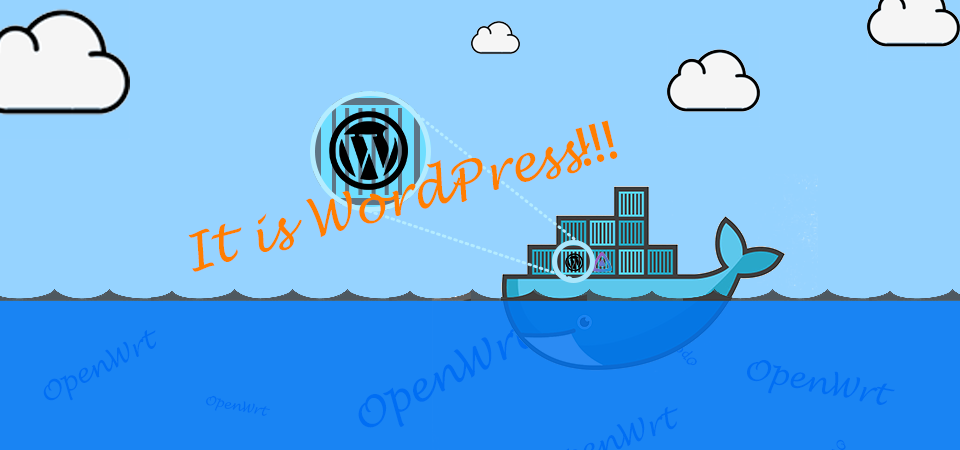
<style>
.page{position:relative;width:960px;height:450px;background:#96d3ff}
.page>*{position:absolute;margin:0}
.t1{font:12px "LucidaHandwriting-Italic";color:#ff7e00}
.t2{font:12px "AdobeHeitiStd-Regular";color:#ff7e00}
.t3{font:9.7px "LucidaHandwriting-Italic";color:#006ef3}
.t4{font:6.2px "LucidaHandwriting-Italic";color:#006ef3}
.t5{font:7.2px "LucidaHandwriting-Italic";color:#006ef3}
.t6{font:3.1px "LucidaHandwriting-Italic";color:#006ef3}
</style>
<div class="page">
<p class="t1" style="left:188px;top:120px;width:430px;height:152px;rotate:-15deg">It is WordPress<span class="t2">!!!</span></p>
<p class="t3" style="left:358px;top:318px;width:175px;height:110px;rotate:-27deg">OpenWrt</p>
<p class="t4" style="left:43px;top:330px;width:113px;height:71px;rotate:-27deg">OpenWrt</p>
<p class="t5" style="left:747px;top:360px;width:148px;height:45px;rotate:11deg">OpenWrt</p>
<p class="t6" style="left:205px;top:395px;width:65px;height:21px;rotate:11deg">OpenWrt</p>
</div>
